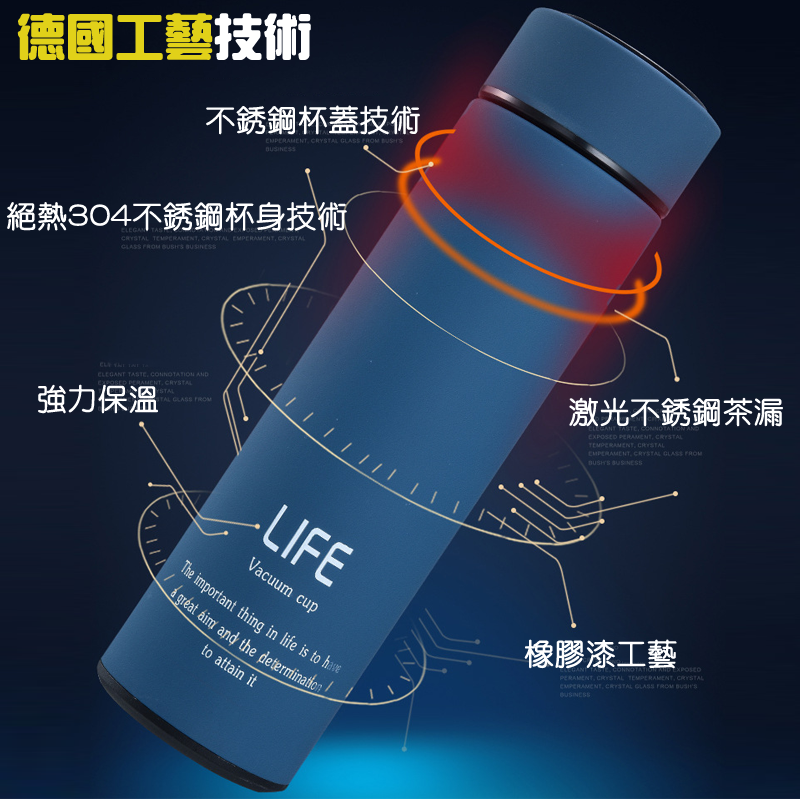
<style>
.page{position:relative;width:800px;height:800px}
.page>*{position:absolute;margin:0}
.t1{font:48px "HanWangZonYi";color:#e1d119;font-weight:bold}
.t2{font:48px "HanWangZonYi";color:#ffffff;font-weight:bold}
.t3{font:30px "HanWangYenLight";color:#ffffff;font-weight:bold}
</style>
<div class="page">
<p class="t1" style="left:17px;top:13px;width:294px;height:47px">德國工藝<span class="t2">技術</span></p>
<p class="t3" style="left:206px;top:105px;width:214px;height:30px">不銹鋼杯蓋技術</p>
<p class="t3" style="left:7px;top:202px;width:340px;height:29px">絕熱304不銹鋼杯身技術</p>
<p class="t3" style="left:38px;top:384px;width:120px;height:30px">強力保溫</p>
<p class="t3" style="left:569px;top:397px;width:214px;height:30px">激光不銹鋼茶漏</p>
<p class="t3" style="left:524px;top:639px;width:153px;height:30px">橡膠漆工藝</p>
</div>
